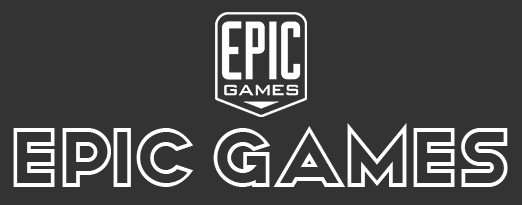
<style>
.page{position:relative;width:522px;height:205px;background:#333333}
.page>*{position:absolute;margin:0}
.t1{font:85px "Avalon-Regular";color:#ffffff}
</style>
<div class="page">
<p class="t1" style="left:13px;top:123px;width:495px;height:64px">Epic games</p>
</div>
